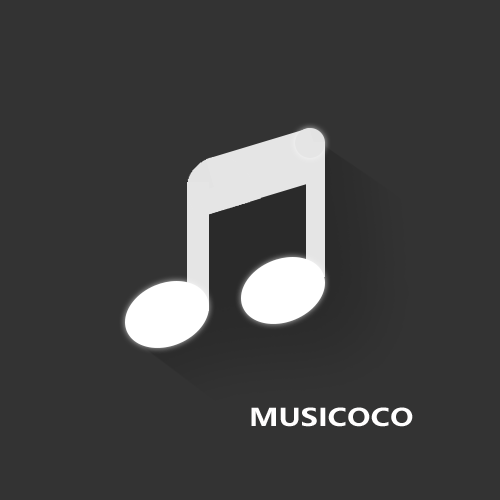
<style>
.page{position:relative;width:500px;height:500px;background:#333333}
.page>*{position:absolute;margin:0}
.t1{font:24px "MicrosoftYaHei-Bold";color:#fffefe;scale:1.2 1}
</style>
<div class="page">
<p class="t1" style="left:251px;top:407px;width:162px;height:20px">MUSICOCO</p>
</div>
